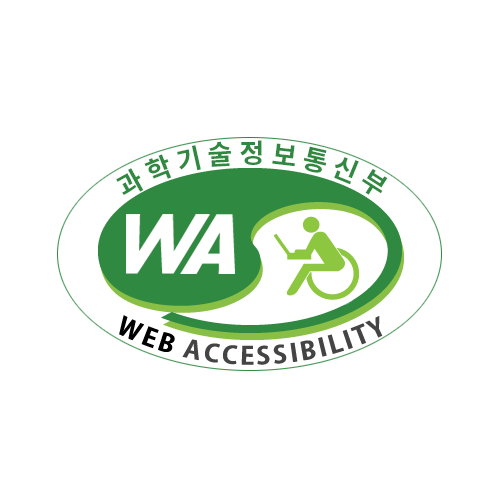
<style>
.page{position:relative;width:500px;height:500px;background:#ffffff}
.page>*{position:absolute;margin:0}
.t1{font:27px "NotoSansCJKkr-Bold";color:#308940}
.t2{font:24px "AdobeGothicStd-Bold";letter-spacing:0.1em;color:#444444}
.t3{font:24px "AdobeGothicStd-Bold";letter-spacing:0.1em;color:#000100}
</style>
<div class="page">
<p class="t1" style="left:177px;top:145px;width:24px;height:26px;rotate:-13deg">기</p>
<p class="t1" style="left:208px;top:141px;width:23px;height:26px;rotate:-3deg">술</p>
<p class="t1" style="left:240px;top:140px;width:22px;height:25px">정</p>
<p class="t1" style="left:272px;top:143px;width:23px;height:24px;rotate:7deg">보</p>
<p class="t1" style="left:303px;top:146px;width:24px;height:27px;rotate:13deg">통</p>
<p class="t1" style="left:144px;top:154px;width:28px;height:25px;rotate:-22deg">학</p>
<p class="t1" style="left:334px;top:157px;width:25px;height:28px;rotate:22deg">신</p>
<p class="t1" style="left:116px;top:168px;width:28px;height:27px;rotate:-29deg">과</p>
<p class="t1" style="left:362px;top:168px;width:26px;height:27px;rotate:33deg">부</p>
<p class="t2" style="left:119px;top:315px;width:264px;height:50px;text-align:center"><span class="t3">WEB </span>ACCESSIBILITY</p>
</div>
